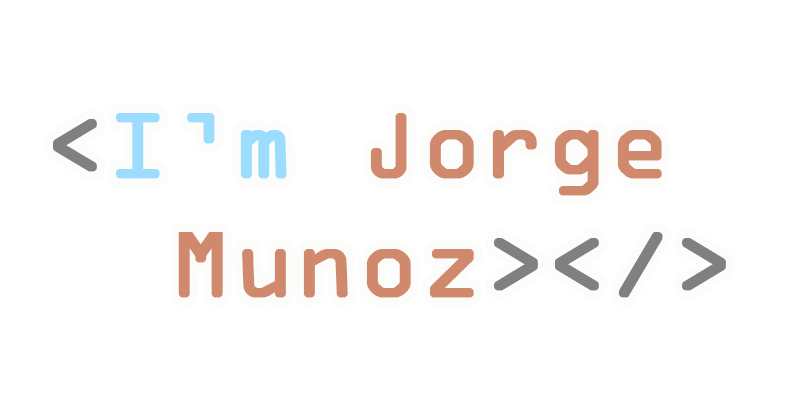
<style>
.page{position:relative;width:799px;height:410px;background:#ffffff}
.page>*{position:absolute;margin:0}
.t1{font:99.5px "OCRAExtended";color:#d0896c;font-weight:bold}
.t2{font:99.5px "OCRAExtended";color:#808080;font-weight:bold}
.t3{font:99.5px "OCRAExtended";color:#9cdcfe;font-weight:bold}
</style>
<div class="page">
<p class="t1" style="left:53px;top:113px;width:673px;height:185px"><span class="t2">&lt;</span><span class="t3">I’m </span>Jorge <br>  Munoz<span class="t2">&gt;&lt;/&gt;</span></p>
</div>
